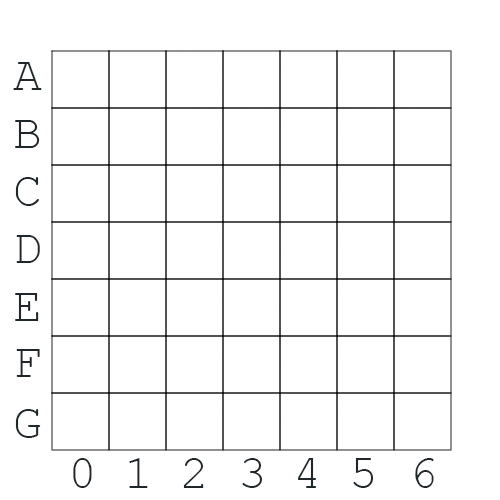
<style>
.page{position:relative;width:500px;height:500px;background:#ffffff}
.page>*{position:absolute;margin:0}
.t1{font:48px "CourierNewPSMT";color:#20272a}
</style>
<div class="page">
<p class="t1" style="left:13px;top:62px;width:29px;height:28px">A</p>
<p class="t1" style="left:15px;top:120px;width:25px;height:28px">B</p>
<p class="t1" style="left:15px;top:177px;width:24px;height:29px">C</p>
<p class="t1" style="left:16px;top:235px;width:24px;height:28px">D</p>
<p class="t1" style="left:15px;top:293px;width:24px;height:28px">E</p>
<p class="t1" style="left:16px;top:349px;width:24px;height:28px">F</p>
<p class="t1" style="left:15px;top:409px;width:26px;height:29px">G</p>
<p class="t1" style="left:73px;top:458px;width:19px;height:30px">0</p>
<p class="t1" style="left:129px;top:458px;width:19px;height:30px">1</p>
<p class="t1" style="left:183px;top:458px;width:21px;height:30px">2</p>
<p class="t1" style="left:242px;top:458px;width:21px;height:30px">3</p>
<p class="t1" style="left:298px;top:458px;width:18px;height:30px">4</p>
<p class="t1" style="left:353px;top:458px;width:21px;height:30px">5</p>
<p class="t1" style="left:415px;top:458px;width:19px;height:30px">6</p>
</div>
